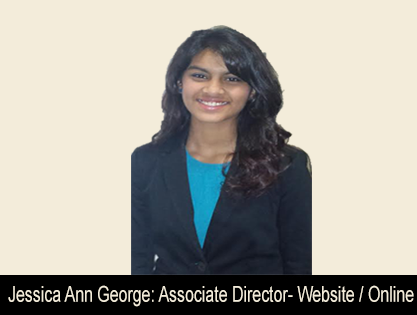
<style>
.page{position:relative;width:417px;height:315px;background:#f3ecda}
.page>*{position:absolute;margin:0}
.t1{font:22.1px "ArialMT";color:#f3ecda;scale:0.72 1}
</style>
<div class="page">
<p class="t1" style="left:8px;top:285px;width:406px;height:22px">Jessica Ann George: Associate Director- Website / Online</p>
</div>
